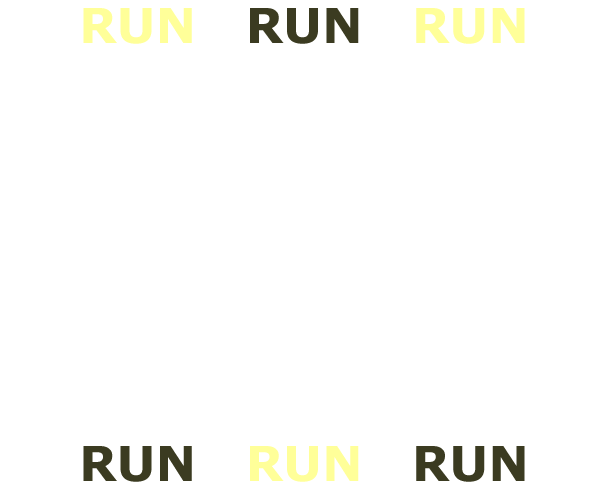
<style>
.page{position:relative;width:608px;height:490px;background:#ffffff}
.page>*{position:absolute;margin:0}
.t1{font:48px "Verdana-Bold";color:#ffff99}
.t2{font:48px "Verdana-Bold";color:#3b3b21}
</style>
<div class="page">
<p class="t1" style="left:83px;top:8px;width:442px;height:36px">RUN   <span class="t2">RUN</span>   RUN</p>
<p class="t2" style="left:83px;top:446px;width:442px;height:36px">RUN   <span class="t1">RUN</span>   RUN</p>
</div>
